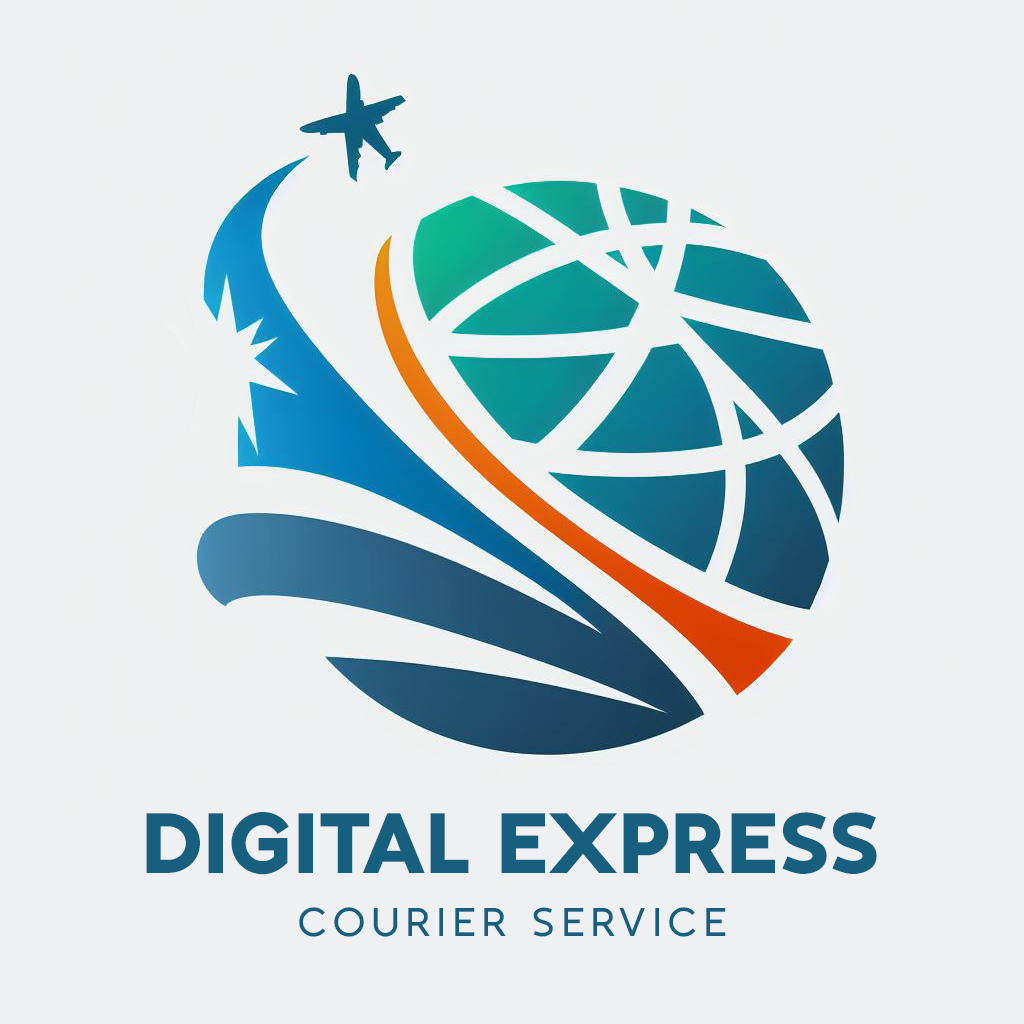
<style>
.page{position:relative;width:1024px;height:1024px;background:#eff0f2}
.page>*{position:absolute;margin:0}
.t1{font:85.3px "Kontora-ExtraBlack";letter-spacing:0.02em;color:#165f7f}
.t2{font:40px "Kontora-SemiBold";letter-spacing:0.18em;color:#165f7f}
</style>
<div class="page">
<p class="t1" style="left:146px;top:812px;width:731px;height:63px">DIGITAL EXPRESS</p>
<p class="t2" style="left:299px;top:907px;width:427px;height:30px">COURIER SERVICE</p>
</div>
